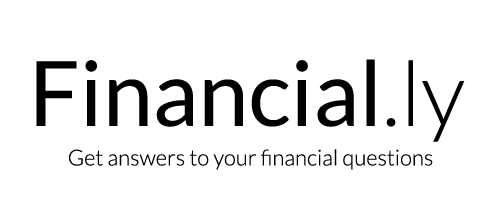
<style>
.page{position:relative;width:500px;height:222px;background:#ffffff}
.page>*{position:absolute;margin:0}
.t1{font:90px "Lato-Regular";color:#000000}
.t2{font:90px "Lato-Light";color:#000000}
.t3{font:22px "Lato-Light";color:#000000}
</style>
<div class="page">
<p class="t1" style="left:36px;top:59px;width:429px;height:83px">Financial<span class="t2">.ly</span></p>
<p class="t3" style="left:69px;top:149px;width:364px;height:21px">Get answers to your financial questions</p>
</div>
